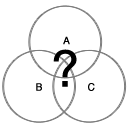
<style>
.page{position:relative;width:128px;height:128px;background:#ffffff}
.page>*{position:absolute;margin:0}
.t1{font:10px "Helvetica";color:#000000;font-weight:bold}
.t2{font:50.8px "Helvetica";color:#000000;font-weight:bold}
</style>
<div class="page">
<p class="t1" style="left:63px;top:36px;width:7px;height:9px">A</p>
<p class="t2" style="left:53px;top:49px;width:24px;height:38px">?</p>
<p class="t1" style="left:36px;top:83px;width:6px;height:8px">B</p>
<p class="t1" style="left:88px;top:83px;width:7px;height:8px">C</p>
</div>
